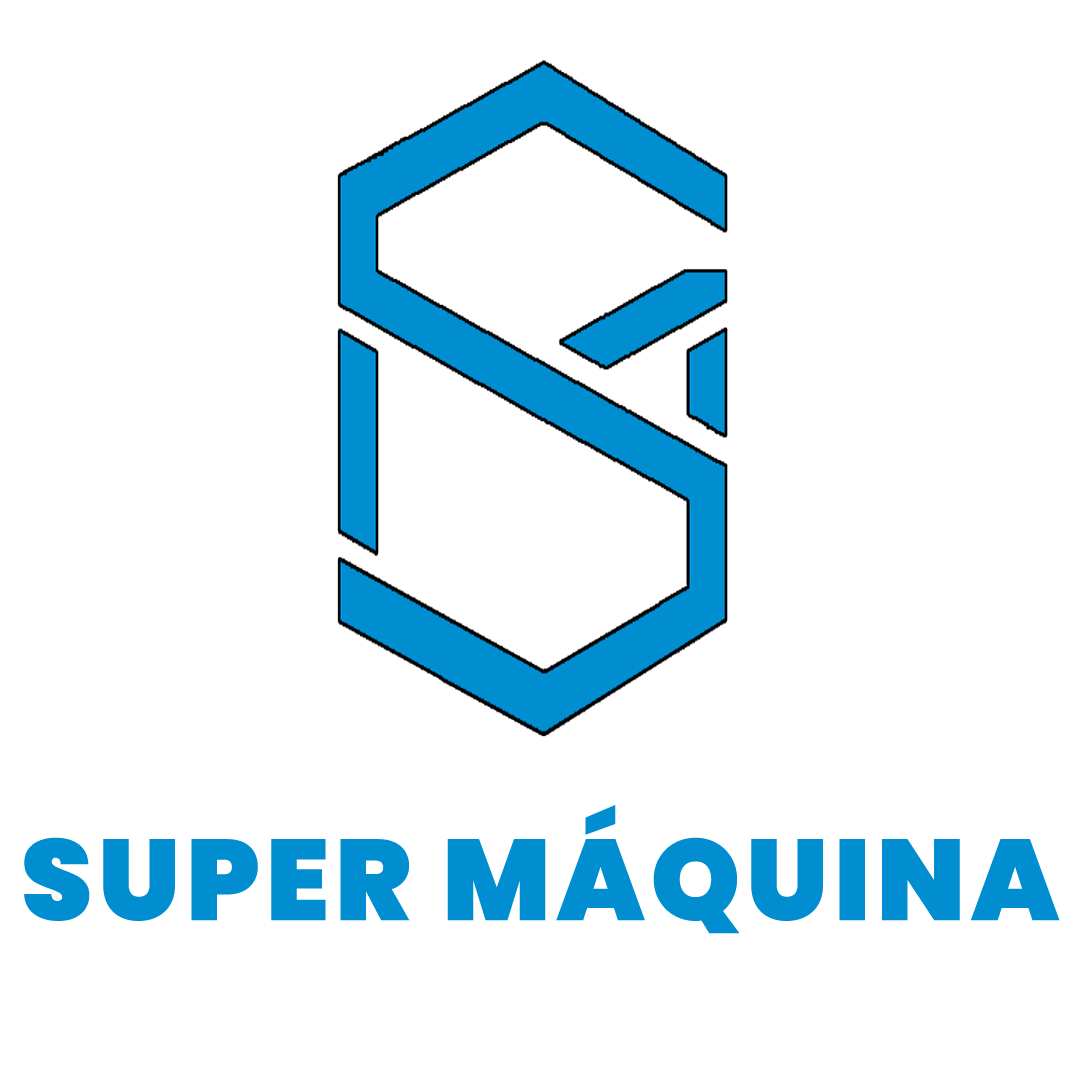
<style>
.page{position:relative;width:1084px;height:1084px;background:#ffffff}
.page>*{position:absolute;margin:0}
.t1{font:114.2px "Poppins-Black";letter-spacing:0.05em;color:#008ed1}
</style>
<div class="page">
<p class="t1" style="left:24px;top:805px;width:1036px;height:129px">SUPER MÁQUINA</p>
</div>
